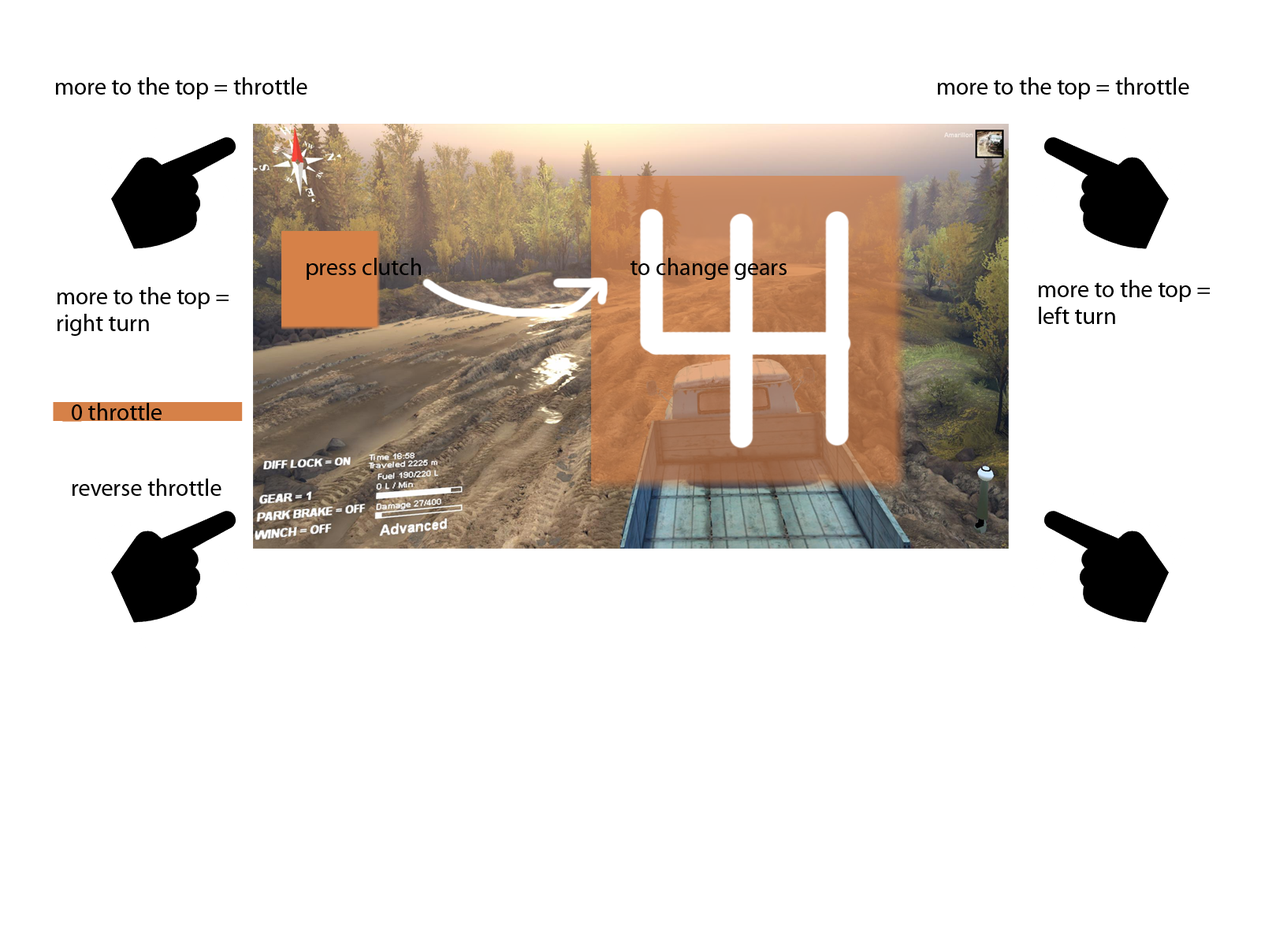
<style>
.page{position:relative;width:1261px;height:946px;background:#ffffff}
.page>*{position:absolute;margin:0}
.t1{font:23.6px "MyriadPro-Regular";color:#000000}
.t2{font:23.6px/5.5px "MyriadPro-Regular";color:#000000}
</style>
<div class="page">
<p class="t1" style="left:56px;top:77px;width:251px;height:22px">more to the top = throttle</p>
<p class="t1" style="left:938px;top:77px;width:251px;height:22px">more to the top = throttle</p>
<p class="t1" style="left:307px;top:258px;width:114px;height:22px">press clutch</p>
<p class="t1" style="left:630px;top:258px;width:156px;height:22px">to change gears</p>
<p class="t2" style="left:1039px;top:280px;width:171px;height:44px">more to the top =<br><br><br><br><br>left turn</p>
<p class="t2" style="left:58px;top:287px;width:171px;height:49px">more to the top =<br><br><br><br><br>right turn</p>
<p class="t1" style="left:72px;top:403px;width:90px;height:17px">0 throttle</p>
<p class="t1" style="left:73px;top:478px;width:148px;height:18px">reverse throttle</p>
</div>
